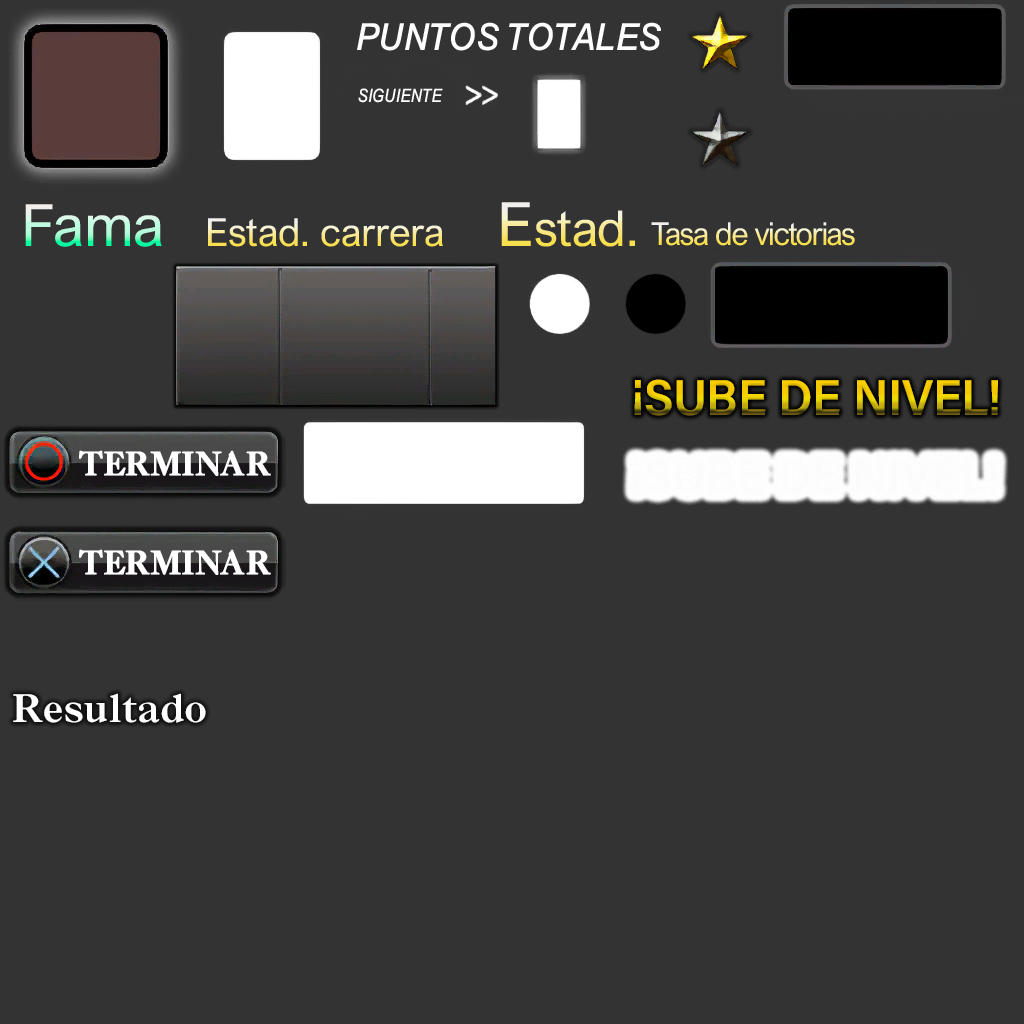
<style>
.page{position:relative;width:1024px;height:1024px;background:#333333}
.page>*{position:absolute;margin:0}
.t1{font:40.2px "Arial-MdmItl";color:#fffefe;text-transform:uppercase;scale:0.93 1}
.t2{font:20px "Arial-MdmItl";color:#ffffff;text-transform:uppercase;scale:0.84 1}
.t3{font:58.3px "ArialNova"}
.t4{font:49.7px "ArialNova"}
.t5{font:61.3px "ArialNova"}
.t6{font:38.7px "ArialNova"}
.t7{font:31.8px "ArialNova";letter-spacing:-0.04em}
.t8{font:50.4px "AcuminConcept-Semibold";text-transform:uppercase;scale:0.94 1}
.t9{font:34.5px "OldStyleMTStd-Bold";letter-spacing:-0.06em;color:#ffffff;font-weight:bold;scale:0.93 1}
.t10{font:40.7px "OldStyleMTStd-Bold";color:#ffffff}
</style>
<div class="page">
<p class="t1" style="left:357px;top:22px;width:304px;height:29px">PUNTOS TOTALES</p>
<p class="t2" style="left:358px;top:88px;width:85px;height:15px">siguiente</p>
<p class="t3" style="left:25px;top:204px;width:137px;height:43px">Fama</p>
<p class="t4" style="left:501px;top:202px;width:134px;height:45px"><span class="t5">E</span>stad.</p>
<p class="t6" style="left:208px;top:218px;width:235px;height:29px">Estad. carrera</p>
<p class="t7" style="left:651px;top:222px;width:204px;height:24px">Tasa de victorias</p>
<p class="t8" style="left:634px;top:379px;width:364px;height:37px">¡sube de nivel!</p>
<p class="t8" style="left:634px;top:379px;width:364px;height:37px">¡sube de nivel!</p>
<p class="t9" style="left:79px;top:450px;width:192px;height:26px">TERMINAR</p>
<p class="t9" style="left:79px;top:549px;width:192px;height:26px">TERMINAR</p>
<p class="t10" style="left:13px;top:693px;width:193px;height:30px">Resultado</p>
</div>
